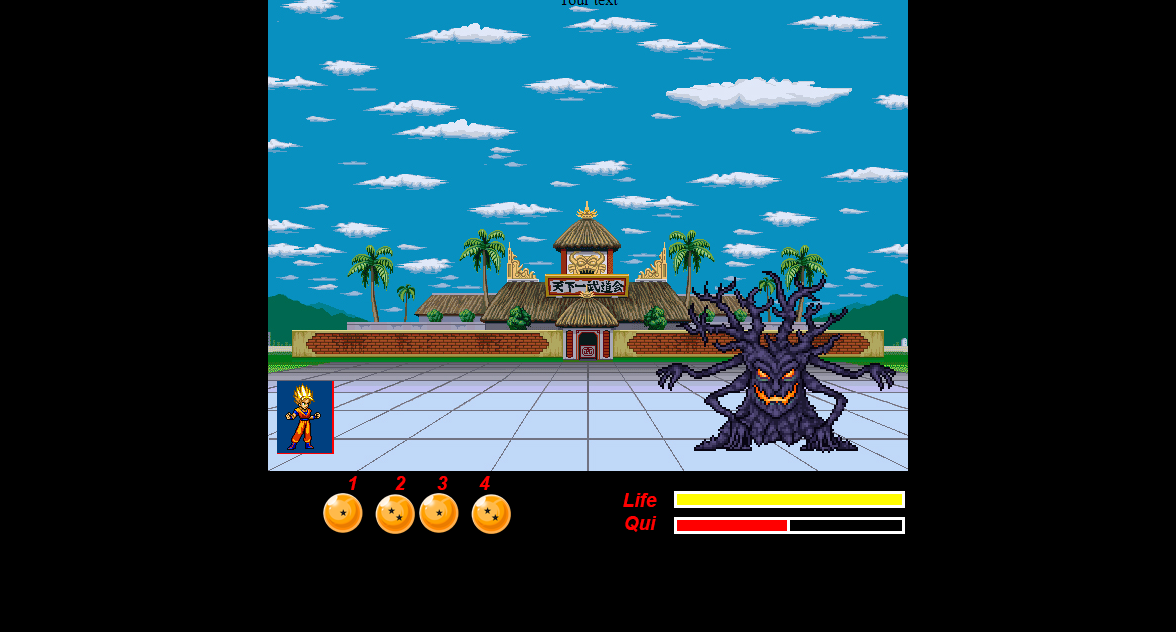
<style>
.page{position:relative;width:1176px;height:632px;background:#000000}
.page>*{position:absolute;margin:0}
.t1{font:19px "Arial-BoldItalicMT";color:#ff0000}
</style>
<div class="page">
<p class="t1" style="left:349px;top:476px;width:141px;height:14px">1       2      3      4</p>
<p class="t1" style="left:623px;top:493px;width:34px;height:39px;text-align:center">Life<br>Qui</p>
</div>
